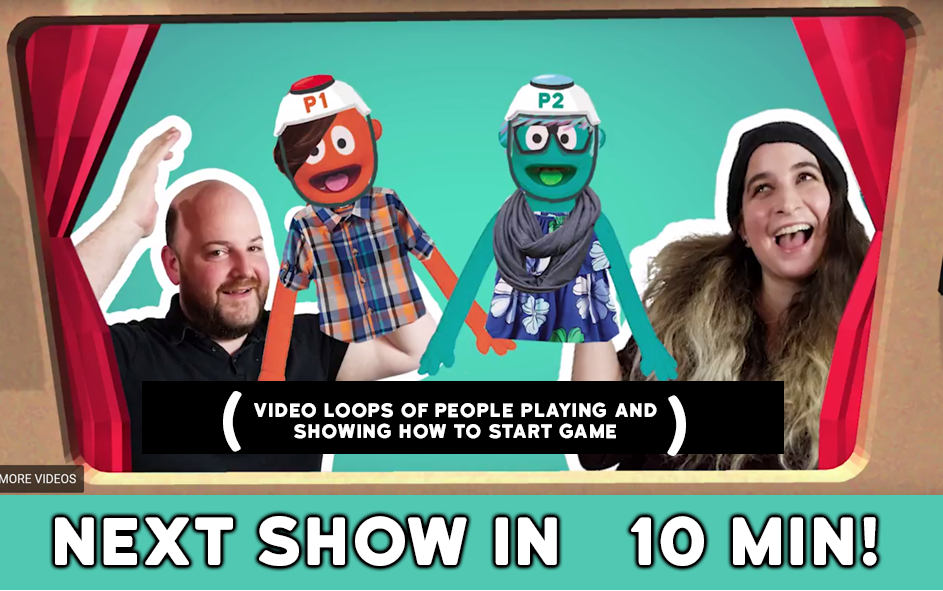
<style>
.page{position:relative;width:943px;height:591px}
.page>*{position:absolute;margin:0}
.t1{font:64.3px "KatahdinRound-Regular";color:#ffffff}
.t2{font:18.7px/21.3px "KatahdinRound-Regular";color:#ffffff}
.t3{font:64.2px "KatahdinRound-Regular";color:#ffffff}
</style>
<div class="page">
<p class="t1" style="left:223px;top:391px;width:19px;height:61px">(</p>
<p class="t1" style="left:667px;top:395px;width:19px;height:61px;rotate:180deg">(</p>
<p class="t2" style="left:254px;top:402px;width:403px;height:37px;text-align:center">VIDEO LOOPS OF PEOPLE PLAYING and <br>showing how to start game</p>
<p class="t3" style="left:55px;top:516px;width:822px;height:50px">NEXT SHOW IN   10 Min!</p>
</div>
